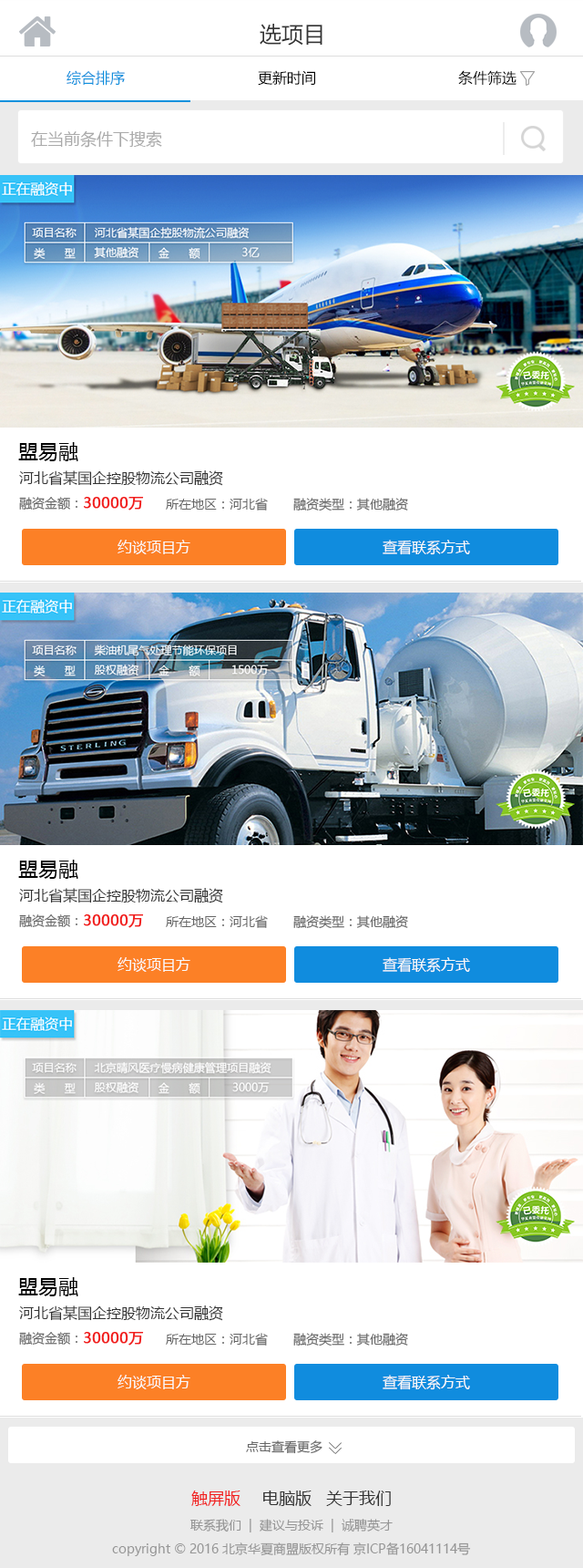
<style>
.page{position:relative;width:583px;height:1568px;background:#ffffff}
.page>*{position:absolute;margin:0}
.t1{font:21.9px "MicrosoftYaHei";color:#333333}
.t2{font:14.6px "MicrosoftYaHei";color:#0f91dd}
.t3{font:14.6px "MicrosoftYaHei";color:#000000}
.t4{font:16.4px "MicrosoftYaHei";color:#aaaaaa}
.t5{font:20.1px "MicrosoftYaHei";color:#000000}
.t6{font:14.6px "MicrosoftYaHei";color:#333333}
.t7{font:14.6px "MicrosoftYaHei";color:#f11d1c;font-weight:bold}
.t8{font:12.8px "MicrosoftYaHei";color:#666666}
.t9{font:14.6px "MicrosoftYaHei";color:#fafaf9}
.t10{font:16.4px "MicrosoftYaHei";color:#f11d1c}
.t11{font:16.4px "MicrosoftYaHei";color:#333333}
.t12{font:12.8px "MicrosoftYaHei";color:#969696}
</style>
<div class="page">
<p class="t1" style="left:260px;top:24px;width:63px;height:22px">选项目</p>
<p class="t2" style="left:67px;top:70px;width:58px;height:16px">综合排序</p>
<p class="t3" style="left:258px;top:70px;width:57px;height:16px">更新时间</p>
<p class="t3" style="left:459px;top:70px;width:58px;height:16px">条件筛选</p>
<p class="t4" style="left:31px;top:130px;width:131px;height:18px">在当前条件下搜索</p>
<p class="t5" style="left:18px;top:442px;width:60px;height:19px">盟易融</p>
<p class="t6" style="left:19px;top:470px;width:204px;height:16px">河北省某国企控股物流公司融资</p>
<p class="t7" style="left:19px;top:497px;width:125px;height:14px"><span class="t8">融资金额：</span>30000万</p>
<p class="t8" style="left:166px;top:498px;width:102px;height:13px">所在地区：河北省</p>
<p class="t8" style="left:294px;top:498px;width:114px;height:13px">融资类型：其他融资</p>
<p class="t9" style="left:118px;top:540px;width:73px;height:14px">约谈项目方</p>
<p class="t9" style="left:383px;top:540px;width:87px;height:15px">查看联系方式</p>
<p class="t5" style="left:18px;top:860px;width:60px;height:19px">盟易融</p>
<p class="t6" style="left:19px;top:888px;width:204px;height:15px">河北省某国企控股物流公司融资</p>
<p class="t7" style="left:19px;top:914px;width:125px;height:14px"><span class="t8">融资金额：</span>30000万</p>
<p class="t8" style="left:166px;top:915px;width:102px;height:13px">所在地区：河北省</p>
<p class="t8" style="left:294px;top:915px;width:114px;height:14px">融资类型：其他融资</p>
<p class="t9" style="left:118px;top:957px;width:73px;height:15px">约谈项目方</p>
<p class="t9" style="left:383px;top:957px;width:87px;height:16px">查看联系方式</p>
<p class="t5" style="left:18px;top:1277px;width:60px;height:19px">盟易融</p>
<p class="t6" style="left:19px;top:1305px;width:204px;height:16px">河北省某国企控股物流公司融资</p>
<p class="t7" style="left:19px;top:1332px;width:125px;height:14px"><span class="t8">融资金额：</span>30000万</p>
<p class="t8" style="left:166px;top:1333px;width:102px;height:13px">所在地区：河北省</p>
<p class="t8" style="left:294px;top:1333px;width:114px;height:13px">融资类型：其他融资</p>
<p class="t9" style="left:118px;top:1375px;width:73px;height:14px">约谈项目方</p>
<p class="t9" style="left:383px;top:1375px;width:87px;height:15px">查看联系方式</p>
<p class="t8" style="left:246px;top:1440px;width:77px;height:14px">点击查看更多</p>
<p class="t10" style="left:191px;top:1491px;width:50px;height:15px">触屏版</p>
<p class="t11" style="left:263px;top:1491px;width:49px;height:15px">电脑版</p>
<p class="t11" style="left:326px;top:1491px;width:65px;height:15px">关于我们</p>
<p class="t12" style="left:191px;top:1519px;width:202px;height:13px">联系我们  |  建议与投诉  |  诚聘英才</p>
<p class="t12" style="left:112px;top:1542px;width:359px;height:14px">copyright © 2016 北京华夏商盟版权所有 京ICP备16041114号</p>
</div>
